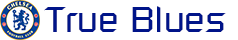
<style>
.page{position:relative;width:238px;height:40px;background:#ffffff}
.page>*{position:absolute;margin:0}
.t1{font:36px "RussellSquare";color:#001489}
</style>
<div class="page">
<p class="t1" style="left:44px;top:6px;width:182px;height:26px">True Blues</p>
</div>
